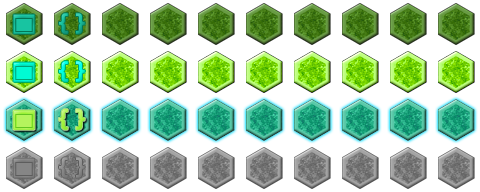
<style>
.page{position:relative;width:480px;height:192px;background:#ffffff}
.page>*{position:absolute;margin:0}
.t1{font:24px "DINPro-Bold";color:#18c4a1}
.t2{font:24px "DINPro-Bold"}
.t3{font:24px "DINPro-Bold";color:#8c8c8c}
</style>
<div class="page">
<p class="t1" style="left:59px;top:13px;width:26px;height:21px">{ }</p>
<p class="t2" style="left:59px;top:61px;width:26px;height:21px">{ }</p>
<p class="t3" style="left:59px;top:157px;width:26px;height:21px">{ }</p>
</div>
